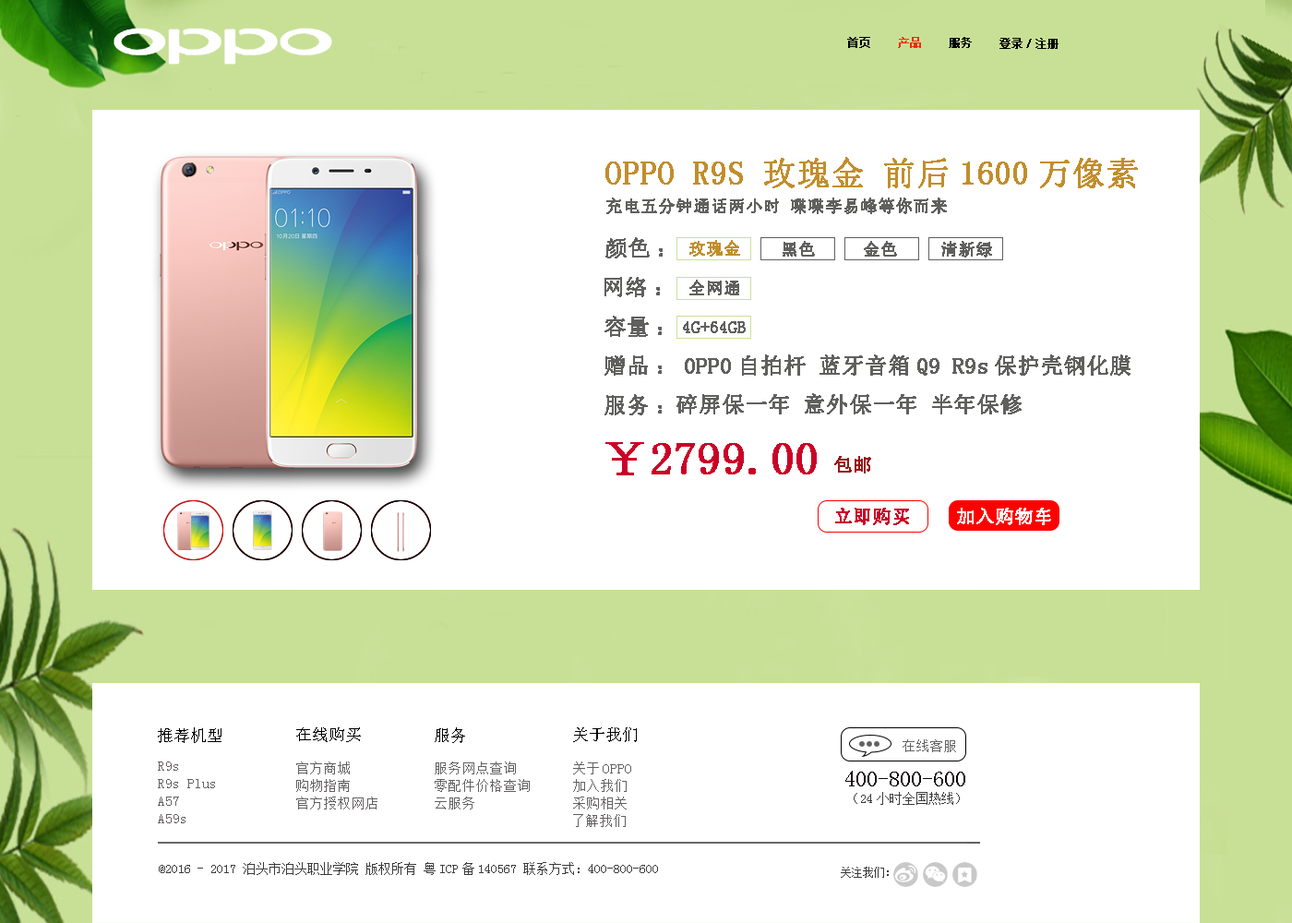
<style>
.page{position:relative;width:1292px;height:923px;background:#ffffff}
.page>*{position:absolute;margin:0}
.t1{font:11.1px "NSimSun";color:#000000;font-weight:bold}
.t2{font:11.1px "NSimSun";color:#f3290e;font-weight:bold}
.t3{font:33.2px "NSimSun";color:#c18e2c;font-weight:bold}
.t4{font:16.6px "NSimSun";color:#60605f;font-weight:bold}
.t5{font:22.1px "NSimSun";color:#60605f;font-weight:bold}
.t6{font:16.6px "NSimSun";color:#c18e2c;font-weight:bold}
.t7{font:46.1px "NSimSun";color:#ca0227;font-weight:bold}
.t8{font:18.5px "SimSun";color:#971717;font-weight:bold}
.t9{font:18.5px "NSimSun";color:#ca0227;font-weight:bold}
.t10{font:18.5px "SimSun";color:#ffffff;font-weight:bold}
</style>
<div class="page">
<p class="t1" style="left:847px;top:37px;width:23px;height:11px">首页</p>
<p class="t2" style="left:898px;top:37px;width:23px;height:11px">产品</p>
<p class="t1" style="left:949px;top:37px;width:23px;height:11px">服务</p>
<p class="t1" style="left:999px;top:38px;width:60px;height:11px">登录/注册</p>
<p class="t3" style="left:605px;top:157px;width:533px;height:31px">OPPO R9S 玫瑰金 前后1600万像素</p>
<p class="t4" style="left:606px;top:197px;width:341px;height:17px">充电五分钟通话两小时 喋喋李易峰等你而来</p>
<p class="t5" style="left:605px;top:237px;width:58px;height:21px">颜色：</p>
<p class="t6" style="left:689px;top:240px;width:51px;height:17px">玫瑰金</p>
<p class="t4" style="left:783px;top:241px;width:32px;height:16px">黑色</p>
<p class="t4" style="left:864px;top:241px;width:33px;height:16px">金色</p>
<p class="t4" style="left:941px;top:241px;width:51px;height:16px">清新绿</p>
<p class="t5" style="left:604px;top:277px;width:56px;height:20px">网络：</p>
<p class="t4" style="left:689px;top:280px;width:50px;height:15px">全网通</p>
<p class="t5" style="left:604px;top:316px;width:58px;height:21px">容量：</p>
<p class="t4" style="left:683px;top:321px;width:63px;height:12px">4G+64GB</p>
<p class="t5" style="left:604px;top:354px;width:527px;height:22px">赠品：OPPO自拍杆 蓝牙音箱Q9 R9s保护壳钢化膜</p>
<p class="t5" style="left:604px;top:394px;width:58px;height:21px">服务：</p>
<p class="t5" style="left:676px;top:393px;width:346px;height:21px">碎屏保一年 意外保一年 半年保修</p>
<p class="t7" style="left:605px;top:442px;width:212px;height:33px">￥2799.00</p>
<p class="t8" style="left:834px;top:456px;width:37px;height:17px">包邮</p>
<p class="t9" style="left:835px;top:508px;width:74px;height:17px">立即购买</p>
<p class="t10" style="left:957px;top:508px;width:94px;height:17px">加入购物车</p>
</div>
